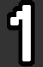
<style>
.page{position:relative;width:43px;height:67px;background:#333333}
.page>*{position:absolute;margin:0}
.t1{font:72px "Cubic_11";letter-spacing:0.1em;color:#ffffff;font-weight:bold}
</style>
<div class="page">
<p class="t1" style="left:10px;top:5px;width:21px;height:57px">1</p>
</div>
